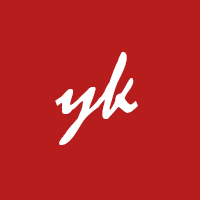
<style>
.page{position:relative;width:200px;height:200px;background:#b71d1d}
.page>*{position:absolute;margin:0}
.t1{font:100px "Mistral";color:#ffffff}
</style>
<div class="page">
<p class="t1" style="left:55px;top:52px;width:83px;height:93px">yk</p>
</div>
